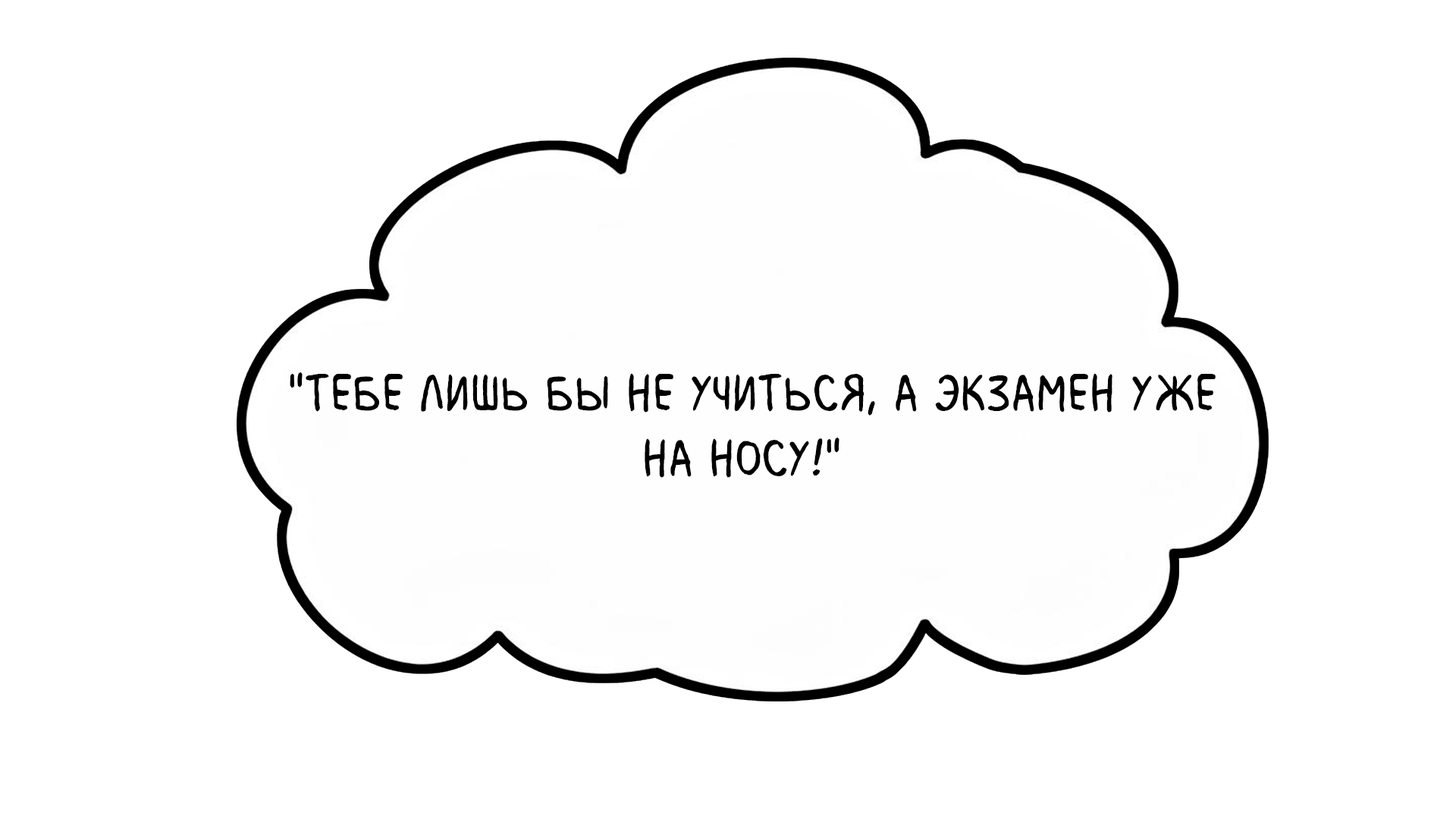
<style>
.page{position:relative;width:1456px;height:819px;background:#ffffff}
.page>*{position:absolute;margin:0}
.t1{font:54.6px "MilkMustacheBB";color:#000000}
</style>
<div class="page">
<p class="t1" style="left:290px;top:372px;width:926px;height:106px">"Тебе лишь бы не учиться, а экзамен уже <br>             на носу!"</p>
</div>
